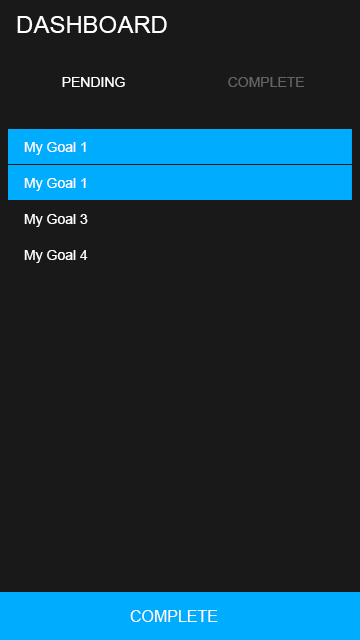
<style>
.page{position:relative;width:360px;height:640px;background:#191919}
.page>*{position:absolute;margin:0}
.t1{font:24px "ArialMT";color:#ffffff}
.t2{font:14px "ArialMT";color:#ffffff}
.t3{font:14px "ArialMT";color:#646464}
.t4{font:16px "ArialMT";color:#ffffff}
</style>
<div class="page">
<p class="t1" style="left:17px;top:16px;width:150px;height:17px">DASHBOARD</p>
<p class="t2" style="left:62px;top:77px;width:63px;height:10px">PENDING</p>
<p class="t3" style="left:228px;top:77px;width:76px;height:10px">COMPLETE</p>
<p class="t2" style="left:24px;top:142px;width:62px;height:13px">My Goal 1</p>
<p class="t2" style="left:24px;top:178px;width:62px;height:13px">My Goal 1</p>
<p class="t2" style="left:24px;top:214px;width:64px;height:13px">My Goal 3</p>
<p class="t2" style="left:24px;top:250px;width:64px;height:13px">My Goal 4</p>
<p class="t4" style="left:130px;top:610px;width:88px;height:12px">COMPLETE</p>
</div>
